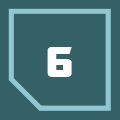
<style>
.page{position:relative;width:120px;height:120px;background:#336166}
.page>*{position:absolute;margin:0}
.t1{font:48px "TransformersMovie";color:#ffffff}
</style>
<div class="page">
<p class="t1" style="left:47px;top:47px;width:25px;height:30px">6</p>
</div>
